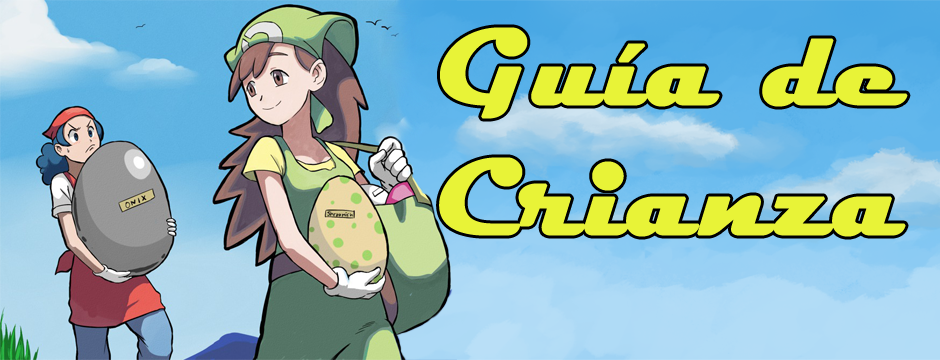
<style>
.page{position:relative;width:940px;height:360px}
.page>*{position:absolute;margin:0}
.t1{font:108.7px "Magneto-Bold";color:#e8f337;font-weight:bold}
</style>
<div class="page">
<p class="t1" style="left:439px;top:27px;width:469px;height:210px">Guía de <br>Crianza</p>
</div>
